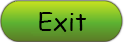
<style>
.page{position:relative;width:125px;height:42px}
.page>*{position:absolute;margin:0}
.t1{font:12px "ComicSansMS";color:#000000}
</style>
<div class="page">
<p class="t1" style="left:39px;top:12px;width:47px;height:20px">Exit</p>
</div>
